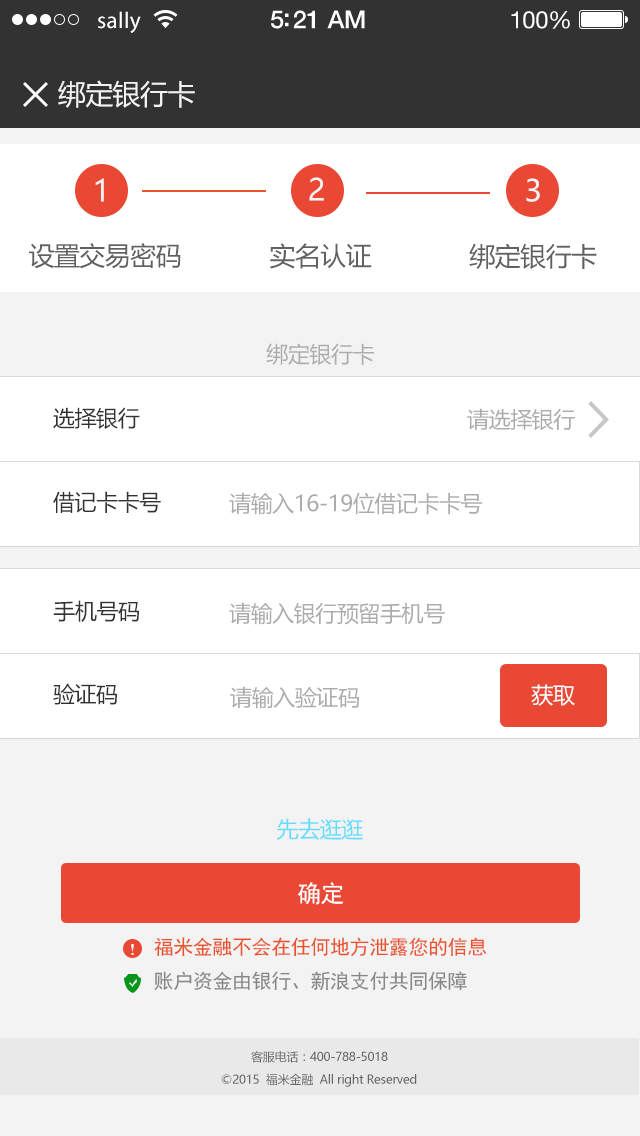
<style>
.page{position:relative;width:640px;height:1136px;background:#ffffff}
.page>*{position:absolute;margin:0}
.t1{font:23px "MyriadPro-Regular";letter-spacing:0.02em;color:#ffffff}
.t2{font:25px "HelveticaNeue-Medium";letter-spacing:-0.02em;color:#ffffff}
.t3{font:24px "HelveticaNeue";letter-spacing:-0.02em;color:#ffffff}
.t4{font:28px "MicrosoftYaHei";letter-spacing:-0.02em;color:#f3f3f3}
.t5{font:30px "MicrosoftYaHei";letter-spacing:-0.02em;color:#f3f3f3}
.t6{font:26px "MicrosoftYaHei";letter-spacing:-0.02em;color:#616161}
.t7{font:22px "MicrosoftYaHei";letter-spacing:-0.02em;color:#acacac}
.t8{font:22px "MicrosoftYaHei";letter-spacing:-0.02em;color:#323232}
.t9{font:22px "MicrosoftYaHei";letter-spacing:-0.02em;color:#ffffff}
.t10{font:22px "MicrosoftYaHei";letter-spacing:-0.02em;color:#63dcff}
.t11{font:24px "SimHei";letter-spacing:-0.02em;color:#ffffff}
.t12{font:20px "SimHei";letter-spacing:-0.02em;color:#ea522b}
.t13{font:20px "SimHei";letter-spacing:-0.02em;color:#878787}
.t14{font:12px "MicrosoftYaHei";letter-spacing:-0.02em;color:#646464}
</style>
<div class="page">
<p class="t1" style="left:98px;top:11px;width:43px;height:22px">sally</p>
<p class="t2" style="left:271px;top:10px;width:94px;height:19px">5:21 AM</p>
<p class="t3" style="left:511px;top:11px;width:59px;height:18px">100%</p>
<p class="t4" style="left:58px;top:80px;width:137px;height:28px">绑定银行卡</p>
<p class="t5" style="left:95px;top:178px;width:9px;height:24px">1</p>
<p class="t5" style="left:309px;top:177px;width:15px;height:24px">2</p>
<p class="t5" style="left:526px;top:178px;width:14px;height:24px">3</p>
<p class="t6" style="left:29px;top:243px;width:152px;height:26px">设置交易密码</p>
<p class="t6" style="left:269px;top:243px;width:103px;height:26px">实名认证</p>
<p class="t6" style="left:469px;top:243px;width:128px;height:26px">绑定银行卡</p>
<p class="t7" style="left:266px;top:343px;width:108px;height:22px">绑定银行卡</p>
<p class="t8" style="left:53px;top:407px;width:87px;height:22px">选择银行</p>
<p class="t7" style="left:467px;top:408px;width:108px;height:23px">请选择银行</p>
<p class="t8" style="left:53px;top:491px;width:108px;height:22px">借记卡卡号</p>
<p class="t7" style="left:229px;top:492px;width:254px;height:23px">请输入16-19位借记卡卡号</p>
<p class="t8" style="left:53px;top:600px;width:86px;height:22px">手机号码</p>
<p class="t7" style="left:229px;top:602px;width:216px;height:23px">请输入银行预留手机号</p>
<p class="t8" style="left:53px;top:683px;width:64px;height:22px">验证码</p>
<p class="t7" style="left:230px;top:686px;width:129px;height:23px">请输入验证码</p>
<p class="t9" style="left:531px;top:684px;width:44px;height:22px">获取</p>
<p class="t10" style="left:276px;top:818px;width:87px;height:22px">先去逛逛</p>
<p class="t11" style="left:297px;top:882px;width:47px;height:23px">确定</p>
<p class="t12" style="left:154px;top:937px;width:333px;height:20px">福米金融不会在任何地方泄露您的信息</p>
<p class="t13" style="left:154px;top:971px;width:313px;height:20px">账户资金由银行、新浪支付共同保障</p>
<p class="t14" style="left:251px;top:1051px;width:137px;height:12px">客服电话：400-788-5018</p>
<p class="t14" style="left:221px;top:1073px;width:196px;height:14px">©2015  福米金融  All right Reserved</p>
</div>
